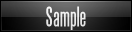
<style>
.page{position:relative;width:132px;height:32px}
.page>*{position:absolute;margin:0}
.t1{font:25px "Steelfish";color:#ffffff}
</style>
<div class="page">
<p class="t1" style="left:46px;top:6px;width:40px;height:24px">Sample</p>
</div>
